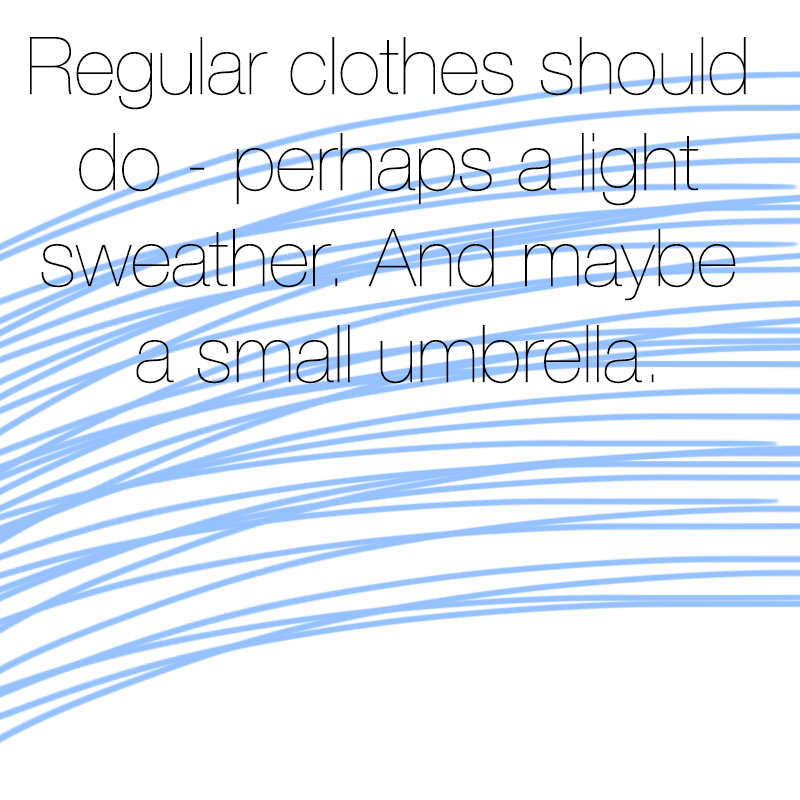
<style>
.page{position:relative;width:800px;height:800px;background:#ffffff}
.page>*{position:absolute;margin:0}
.t1{font:80px "HelveticaNeue-UltraLight";color:#000000}
</style>
<div class="page">
<p class="t1" style="left:30px;top:37px;width:716px;height:347px;text-align:center">Regular clothes should <br>do - perhaps a light <br>sweather. And maybe <br>a small umbrella.</p>
</div>
